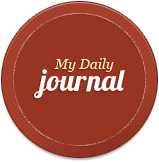
<style>
.page{position:relative;width:159px;height:162px;background:#9c3520}
.page>*{position:absolute;margin:0}
.t1{font:14px "Georgia-Italic";color:#f5e9bf}
.t2{font:30px "Lobster1.4";color:#fffefe}
</style>
<div class="page">
<p class="t1" style="left:54px;top:58px;width:60px;height:14px">My Daily</p>
<p class="t2" style="left:34px;top:69px;width:91px;height:30px">journal</p>
</div>
